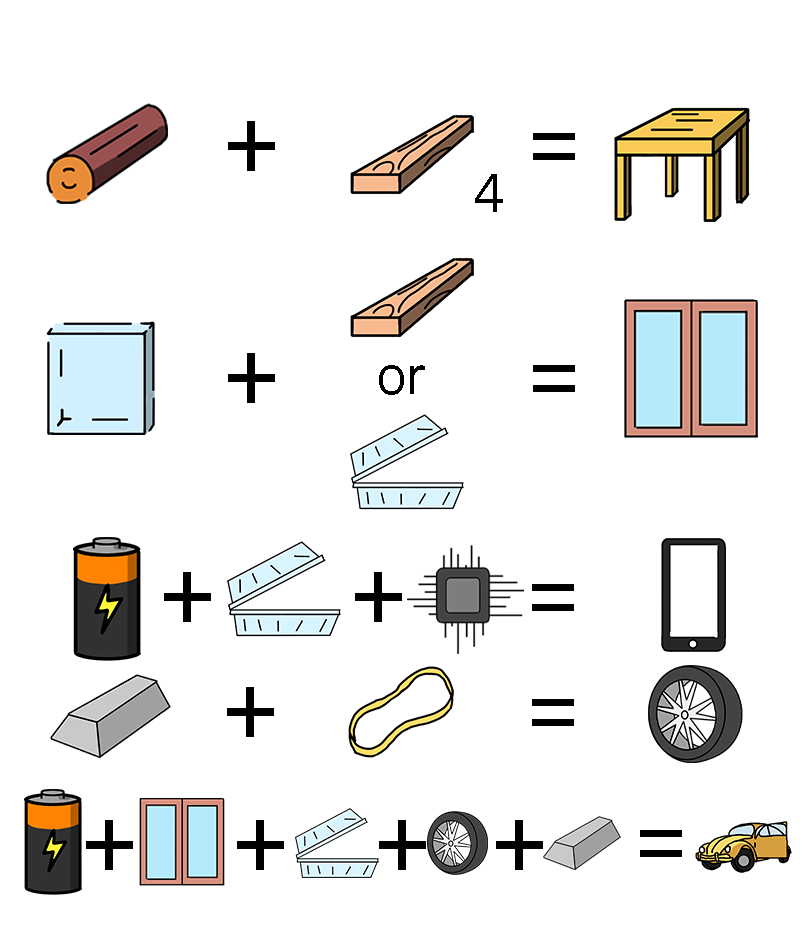
<style>
.page{position:relative;width:808px;height:933px;background:#ffffff}
.page>*{position:absolute;margin:0}
.t1{font:50px "NanumBarunGothic";color:#000000}
.t2{font:49.8px "NanumBarunGothic";color:#000000}
</style>
<div class="page">
<p class="t1" style="left:475px;top:174px;width:28px;height:38px">4</p>
<p class="t2" style="left:379px;top:365px;width:46px;height:30px">or</p>
</div>
